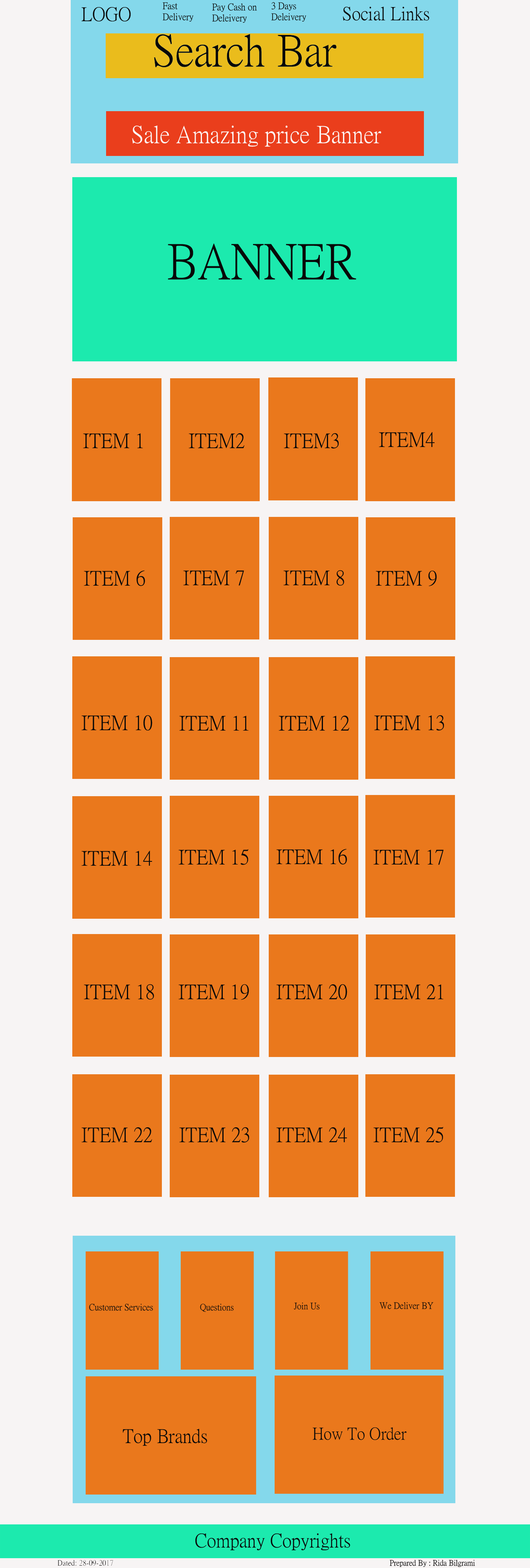
<style>
.page{position:relative;width:530px;height:1568px;background:#ea781c}
.page>*{position:absolute;margin:0}
.t1{font:9.4px "PMingLiU";color:#080808}
.t2{font:19.2px "PMingLiU";color:#080808}
.t3{font:18.5px "PMingLiU";color:#080808}
.t4{font:24px "PMingLiU";color:#fcfafa}
.t5{font:20.4px "PMingLiU";color:#080808}
.t6{font:9px "PMingLiU";color:#080808}
.t7{font:16.9px "PMingLiU";color:#080808}
</style>
<div class="page">
<p class="t1" style="left:163px;top:2px;width:31px;height:20px">Fast <br>Delivery</p>
<p class="t1" style="left:212px;top:3px;width:45px;height:20px">Pay Cash on <br>Deleivery</p>
<p class="t1" style="left:271px;top:2px;width:35px;height:20px">3 Days<br>Deleivery</p>
<p class="t2" style="left:81px;top:7px;width:50px;height:15px">LOGO</p>
<p class="t3" style="left:343px;top:7px;width:86px;height:14px">Social Links</p>
<p class="t4" style="left:132px;top:125px;width:249px;height:22px">Sale Amazing price Banner</p>
<p class="t5" style="left:83px;top:433px;width:60px;height:15px">ITEM 1</p>
<p class="t5" style="left:189px;top:433px;width:55px;height:15px">ITEM2</p>
<p class="t5" style="left:284px;top:433px;width:55px;height:16px">ITEM3</p>
<p class="t5" style="left:379px;top:432px;width:55px;height:15px">ITEM4</p>
<p class="t5" style="left:283px;top:570px;width:61px;height:16px">ITEM 8</p>
<p class="t5" style="left:84px;top:570px;width:61px;height:16px">ITEM 6</p>
<p class="t5" style="left:183px;top:570px;width:61px;height:16px">ITEM 7</p>
<p class="t5" style="left:376px;top:570px;width:61px;height:16px">ITEM 9</p>
<p class="t5" style="left:81px;top:715px;width:71px;height:16px">ITEM 10</p>
<p class="t5" style="left:179px;top:716px;width:70px;height:15px">ITEM 11</p>
<p class="t5" style="left:278px;top:716px;width:71px;height:15px">ITEM 12</p>
<p class="t5" style="left:374px;top:715px;width:70px;height:16px">ITEM 13</p>
<p class="t5" style="left:81px;top:851px;width:71px;height:15px">ITEM 14</p>
<p class="t5" style="left:178px;top:849px;width:71px;height:16px">ITEM 15</p>
<p class="t5" style="left:276px;top:849px;width:71px;height:16px">ITEM 16</p>
<p class="t5" style="left:373px;top:850px;width:70px;height:15px">ITEM 17</p>
<p class="t5" style="left:84px;top:984px;width:70px;height:16px">ITEM 18</p>
<p class="t5" style="left:178px;top:984px;width:71px;height:16px">ITEM 19</p>
<p class="t5" style="left:276px;top:984px;width:71px;height:16px">ITEM 20</p>
<p class="t5" style="left:374px;top:984px;width:69px;height:15px">ITEM 21</p>
<p class="t5" style="left:81px;top:1127px;width:71px;height:15px">ITEM 22</p>
<p class="t5" style="left:179px;top:1127px;width:70px;height:16px">ITEM 23</p>
<p class="t5" style="left:276px;top:1127px;width:71px;height:15px">ITEM 24</p>
<p class="t5" style="left:373px;top:1127px;width:70px;height:16px">ITEM 25</p>
<p class="t6" style="left:89px;top:1304px;width:64px;height:7px">Customer Services</p>
<p class="t6" style="left:200px;top:1304px;width:34px;height:8px">Questions</p>
<p class="t6" style="left:294px;top:1302px;width:26px;height:8px">Join Us</p>
<p class="t6" style="left:379px;top:1302px;width:54px;height:7px">We Deliver BY</p>
<p class="t2" style="left:123px;top:1429px;width:84px;height:17px">Top Brands</p>
<p class="t7" style="left:312px;top:1427px;width:95px;height:13px">How To Order</p>
</div>
